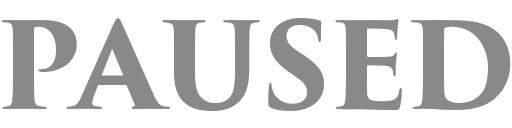
<style>
.page{position:relative;width:512px;height:128px;background:#ffffff}
.page>*{position:absolute;margin:0}
.t1{font:118.3px "TrajanPro3-Bold";color:#898989}
</style>
<div class="page">
<p class="t1" style="left:1px;top:18px;width:510px;height:93px">PAUSED</p>
</div>
